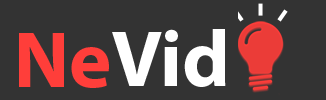
<style>
.page{position:relative;width:326px;height:100px;background:#333333}
.page>*{position:absolute;margin:0}
.t1{font:80px "MyriadPro-Bold";color:#ffffff}
.t2{font:80px "MyriadPro-Bold";color:#ff3e3a}
</style>
<div class="page">
<p class="t1" style="left:112px;top:29px;width:114px;height:58px">Vid</p>
<p class="t2" style="left:19px;top:33px;width:90px;height:55px">Ne</p>
</div>
